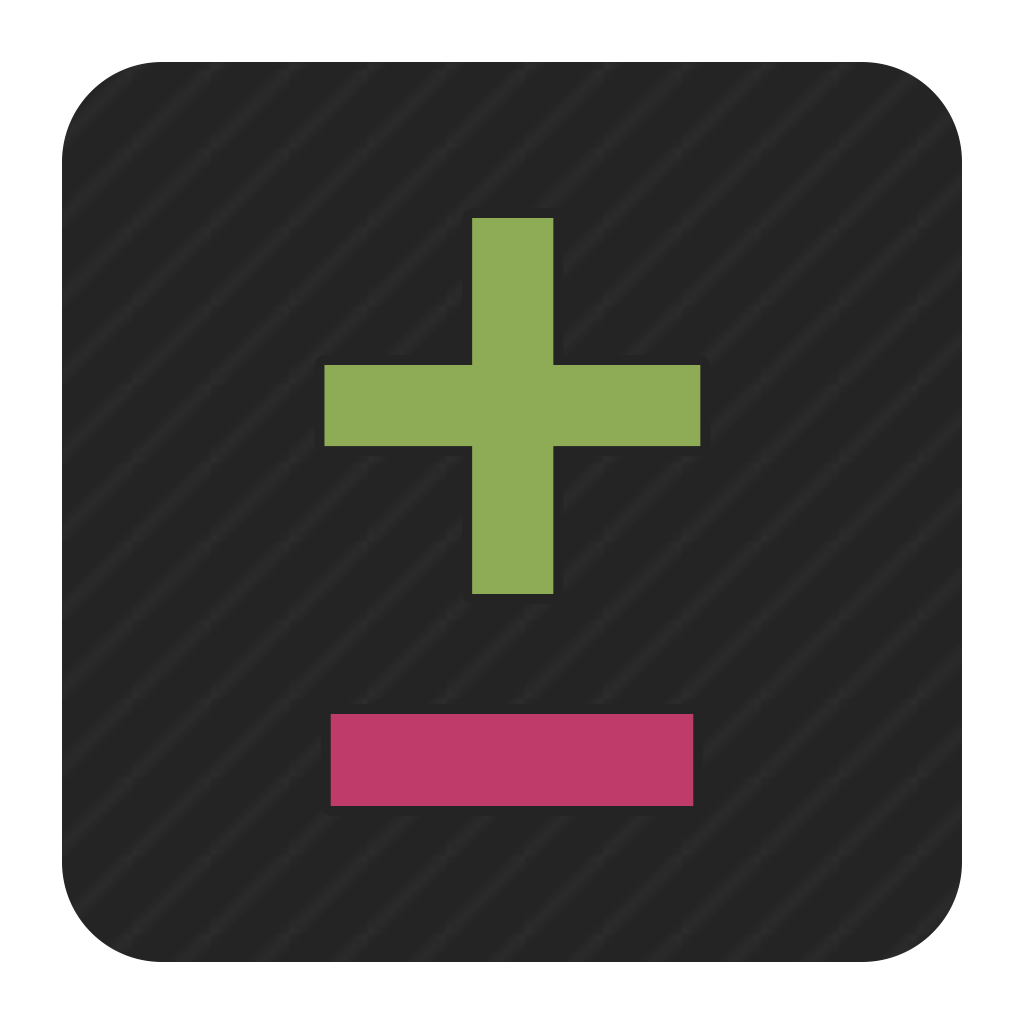
<style>
.page{position:relative;width:1024px;height:1024px;background:#242424}
.page>*{position:absolute;margin:0}
.t1{font:700px "Menlo-Bold";color:#8eab55}
.t2{font:700px "Menlo-Bold";color:#bf3b69}
</style>
<div class="page">
<p class="t1" style="left:324px;top:218px;width:377px;height:376px">+</p>
<p class="t2" style="left:330px;top:714px;width:364px;height:92px">-</p>
</div>
